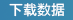
<style>
.page{position:relative;width:73px;height:20px}
.page>*{position:absolute;margin:0}
.t1{font:14px "LiHeiPro";color:#ffffff}
</style>
<div class="page">
<p class="t1" style="left:9px;top:3px;width:56px;height:14px">下载数据</p>
</div>
